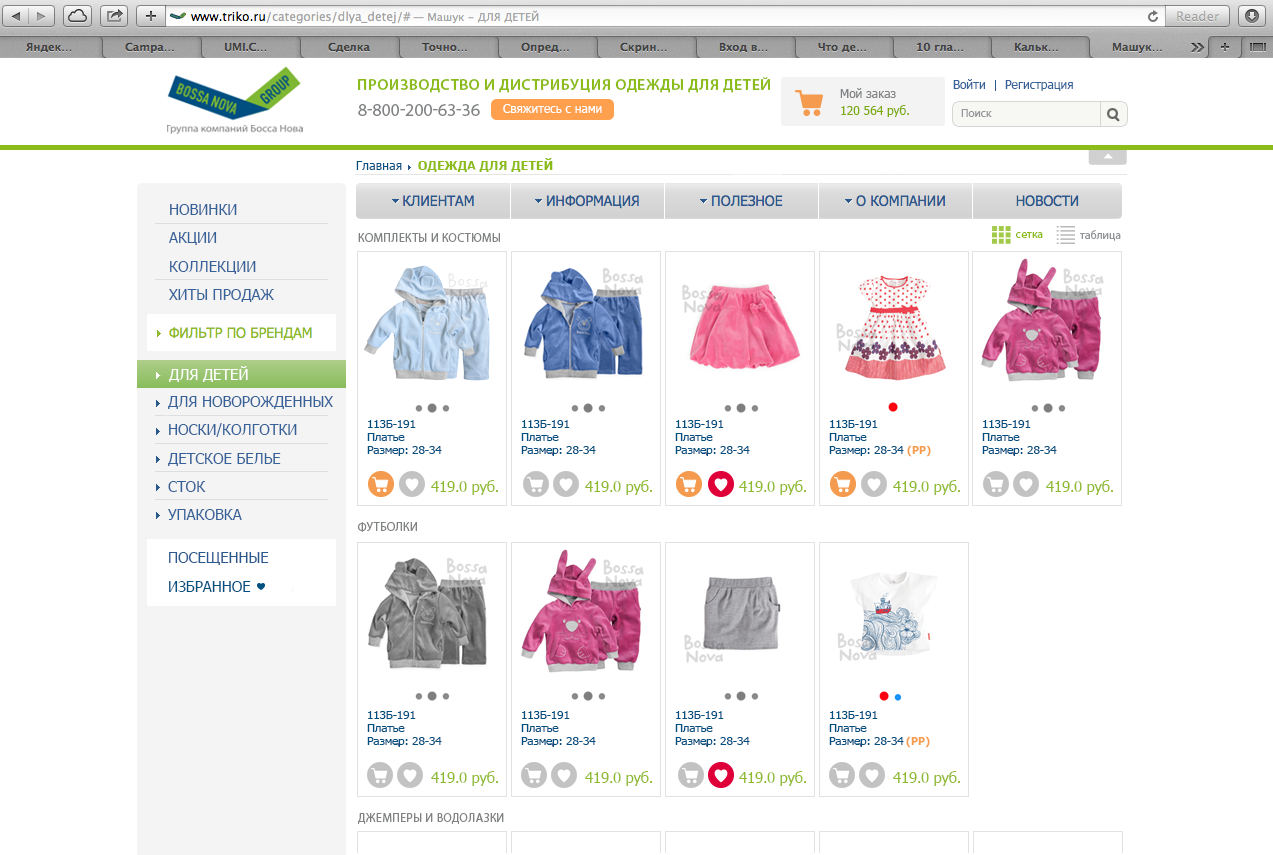
<style>
.page{position:relative;width:1273px;height:855px;background:#ffffff}
.page>*{position:absolute;margin:0}
.t1{font:15.4px "MyriadPro-Semibold";letter-spacing:0.03em;color:#8cbc1a;text-transform:uppercase}
.t2{font:12px "Tahoma";color:#808284}
.t3{font:12px "Tahoma";color:#376299}
.t4{font:17.5px "MyriadPro-Regular";color:#808284;text-transform:uppercase}
.t5{font:12px "Tahoma";color:#ffffff}
.t6{font:12px "Tahoma";color:#7bab08}
.t7{font:11px "Tahoma";letter-spacing:0.005em;color:#939598}
.t8{font:12px "Tahoma";color:#004f81;scale:1.04 1}
.t9{font:12px "Tahoma-Bold";color:#8cbc1a;scale:1.04 1}
.t10{font:15.2px/28.4px "Tahoma";letter-spacing:-0.01em;color:#376299;text-transform:uppercase}
.t11{font:12px "MyriadPro-Regular";letter-spacing:0.03em;color:#808284;text-transform:uppercase}
.t12{font:11.5px "MyriadPro-Regular";color:#8cbc1a}
.t13{font:11.5px "MyriadPro-Regular";color:#939598}
.t14{font:15.2px "Tahoma";letter-spacing:-0.01em;color:#ffffff;text-transform:uppercase}
.t15{font:11px/13px "Tahoma";color:#004f81;scale:1.05 1}
.t16{font:11px/13px "Tahoma";color:#004f81;text-transform:uppercase;scale:1.05 1}
.t17{font:11px "Tahoma-Bold";letter-spacing:-0.005em;color:#f59d4b}
.t18{font:15px "Tahoma";letter-spacing:-0.025em;color:#8eba2b;text-transform:uppercase}
.t19{font:15px "Tahoma";letter-spacing:-0.025em;color:#8eba2b}
.t20{font:15.2px "Tahoma";letter-spacing:-0.01em;color:#2a598e;text-transform:uppercase}
.t21{font:15.2px "Tahoma";letter-spacing:-0.01em;color:#004f81;text-transform:uppercase}
</style>
<div class="page">
<p class="t1" style="left:358px;top:77px;width:412px;height:16px">Производство и дистрибуция одежды для детей</p>
<p class="t2" style="left:840px;top:88px;width:56px;height:10px">Мой заказ</p>
<p class="t3" style="left:953px;top:79px;width:32px;height:10px">Войти</p>
<p class="t3" style="left:1005px;top:80px;width:68px;height:11px">Регистрация</p>
<p class="t4" style="left:358px;top:104px;width:122px;height:12px">8-800-200-63-36</p>
<p class="t5" style="left:503px;top:104px;width:99px;height:9px">Свяжитесь с нами</p>
<p class="t6" style="left:841px;top:105px;width:68px;height:12px">120 564 руб.</p>
<p class="t7" style="left:961px;top:109px;width:31px;height:8px">Поиск</p>
<p class="t8" style="left:356px;top:161px;width:46px;height:9px">Главная</p>
<p class="t9" style="left:418px;top:158px;width:135px;height:14px">ОДЕЖДА ДЛЯ ДЕТЕЙ</p>
<p class="t10" style="left:169px;top:204px;width:105px;height:98px">НОВИНКИ<br>акции<br>коллекции<br>хиты продаж</p>
<p class="t11" style="left:358px;top:233px;width:142px;height:9px">КоМПЛЕКТЫ И КОСТЮМЫ</p>
<p class="t12" style="left:1016px;top:232px;width:27px;height:6px">сетка</p>
<p class="t13" style="left:1080px;top:230px;width:41px;height:11px">таблица</p>
<p class="t10" style="left:168px;top:364px;width:165px;height:156px">ДЛЯ ДЕТЕЙ<br>ДЛЯ НОВОРОЖДЕННЫХ<br>НОСКИ/КОЛГОТКИ<br>ДЕТСКОЕ БЕЛЬЕ<br>СТОК<br>УПАКОВКА</p>
<p class="t14" style="left:169px;top:366px;width:79px;height:16px">для детей</p>
<p class="t15" style="left:367px;top:420px;width:75px;height:36px"><span class="t16">113Б-191<br>П</span>латье<br>Размер: 28-34</p>
<p class="t15" style="left:521px;top:420px;width:75px;height:36px"><span class="t16">113Б-191<br>П</span>латье<br>Размер: 28-34</p>
<p class="t15" style="left:675px;top:420px;width:75px;height:36px"><span class="t16">113Б-191<br>П</span>латье<br>Размер: 28-34</p>
<p class="t15" style="left:829px;top:420px;width:75px;height:36px"><span class="t16">113Б-191<br>П</span>латье<br>Размер: 28-34</p>
<p class="t15" style="left:982px;top:420px;width:75px;height:36px"><span class="t16">113Б-191<br>П</span>латье<br>Размер: 28-34</p>
<p class="t17" style="left:907px;top:445px;width:24px;height:12px">(РР)</p>
<p class="t18" style="left:431px;top:480px;width:67px;height:15px">419.0 <span class="t19">руб.</span></p>
<p class="t18" style="left:585px;top:480px;width:67px;height:15px">419.0 <span class="t19">руб.</span></p>
<p class="t18" style="left:739px;top:480px;width:67px;height:15px">419.0 <span class="t19">руб.</span></p>
<p class="t18" style="left:893px;top:480px;width:67px;height:15px">419.0 <span class="t19">руб.</span></p>
<p class="t18" style="left:1046px;top:480px;width:67px;height:15px">419.0 <span class="t19">руб.</span></p>
<p class="t11" style="left:358px;top:522px;width:59px;height:10px">Футболки</p>
<p class="t20" style="left:169px;top:552px;width:100px;height:13px">ПОСЕЩЕННЫЕ</p>
<p class="t21" style="left:169px;top:581px;width:82px;height:11px">Избранное</p>
<p class="t15" style="left:367px;top:711px;width:75px;height:36px"><span class="t16">113Б-191<br>П</span>латье<br>Размер: 28-34</p>
<p class="t15" style="left:521px;top:711px;width:75px;height:36px"><span class="t16">113Б-191<br>П</span>латье<br>Размер: 28-34</p>
<p class="t15" style="left:675px;top:711px;width:75px;height:36px"><span class="t16">113Б-191<br>П</span>латье<br>Размер: 28-34</p>
<p class="t15" style="left:829px;top:711px;width:75px;height:36px"><span class="t16">113Б-191<br>П</span>латье<br>Размер: 28-34</p>
<p class="t17" style="left:906px;top:736px;width:24px;height:12px">(РР)</p>
<p class="t18" style="left:431px;top:771px;width:67px;height:15px">419.0 <span class="t19">руб.</span></p>
<p class="t18" style="left:585px;top:771px;width:67px;height:15px">419.0 <span class="t19">руб.</span></p>
<p class="t18" style="left:739px;top:771px;width:67px;height:15px">419.0 <span class="t19">руб.</span></p>
<p class="t18" style="left:893px;top:771px;width:67px;height:15px">419.0 <span class="t19">руб.</span></p>
<p class="t11" style="left:358px;top:813px;width:146px;height:11px">ДЖЕМПЕРЫ И ВОДОЛАЗКИ</p>
</div>
